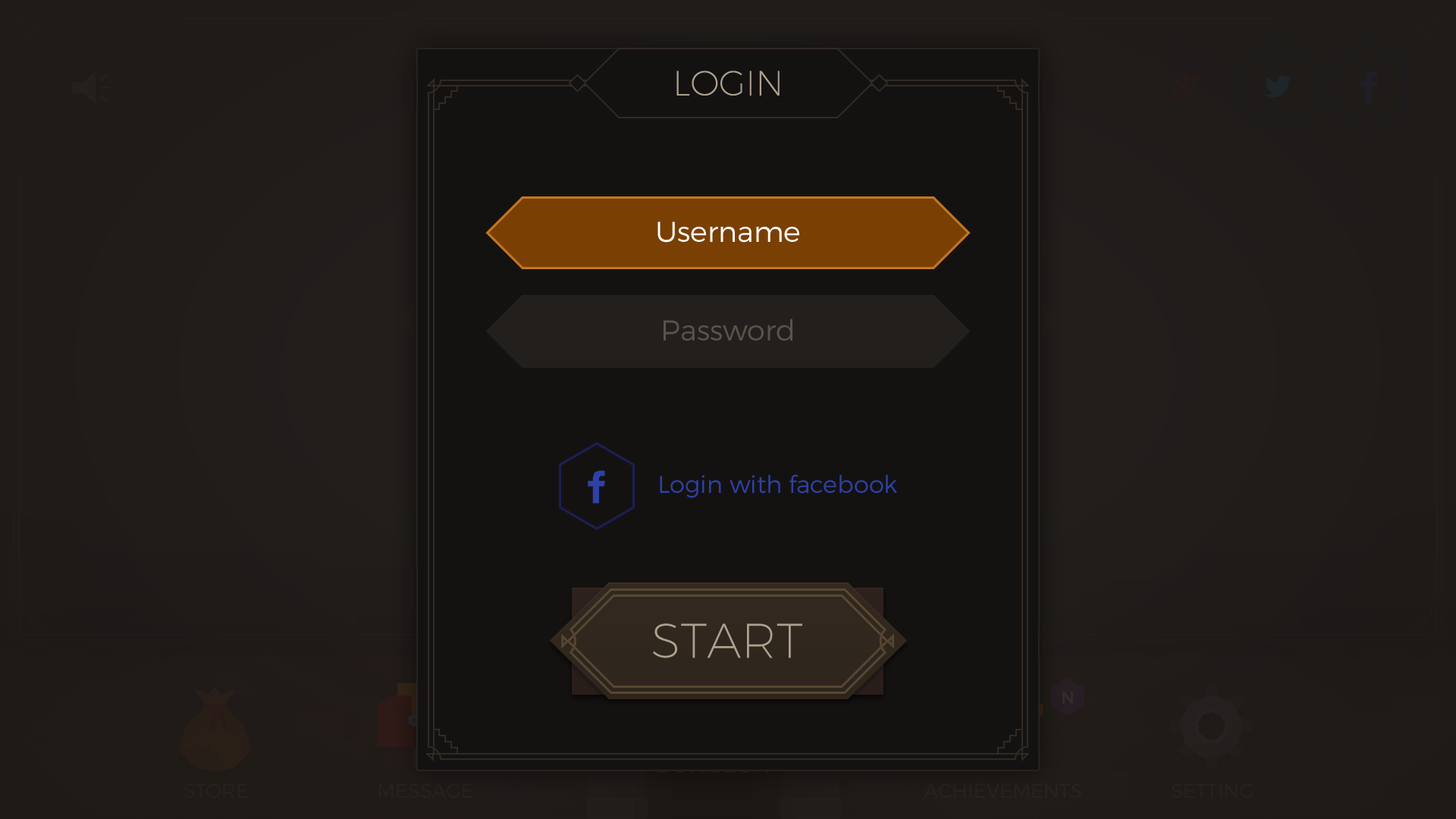
<style>
.page{position:relative;width:1456px;height:819px;background:#141211}
.page>*{position:absolute;margin:0}
.t1{font:35.1px "Montserrat-UltraLight";color:#aea190;text-transform:uppercase}
.t2{font:28.8px "Montserrat-Light";color:#ffffff}
.t3{font:28.8px "Montserrat-Light";color:#5b534a}
.t4{font:24.3px "Montserrat-Light";color:#2e41a6}
.t5{font:48.9px "Montserrat-UltraLight";color:#aea190;text-transform:uppercase}
</style>
<div class="page">
<p class="t1" style="left:676px;top:71px;width:104px;height:25px">Login</p>
<p class="t2" style="left:657px;top:221px;width:142px;height:22px">Username</p>
<p class="t3" style="left:664px;top:318px;width:128px;height:23px">Password</p>
<p class="t4" style="left:660px;top:475px;width:237px;height:23px">Login with facebook</p>
<p class="t5" style="left:653px;top:623px;width:149px;height:35px">START</p>
</div>
